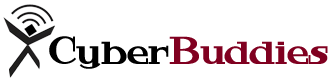
<style>
.page{position:relative;width:336px;height:82px;background:#ffffff}
.page>*{position:absolute;margin:0}
.t1{font:36px "HardlyWorthitNF";color:#800020}
.t2{font:36px "HardlyWorthitNF";color:#000000}
</style>
<div class="page">
<p class="t1" style="left:49px;top:32px;width:282px;height:40px"><span class="t2">Cyber</span>Buddies</p>
</div>
